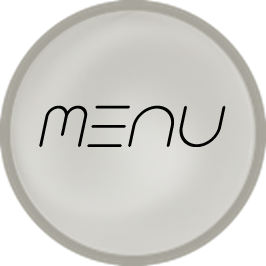
<style>
.page{position:relative;width:266px;height:266px}
.page>*{position:absolute;margin:0}
.t1{font:55px "NEONCLUBMUSIC-Italic";color:#010100}
</style>
<div class="page">
<p class="t1" style="left:39px;top:105px;width:187px;height:42px">Menu</p>
</div>
